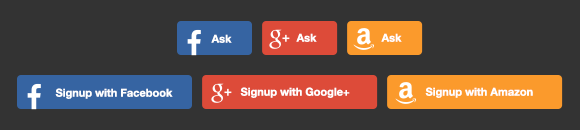
<style>
.page{position:relative;width:580px;height:130px;background:#333333}
.page>*{position:absolute;margin:0}
.t1{font:11px "HelveticaNeue-Bold";color:#ffffff}
</style>
<div class="page">
<p class="t1" style="left:211px;top:34px;width:21px;height:9px">Ask</p>
<p class="t1" style="left:296px;top:33px;width:21px;height:9px">Ask</p>
<p class="t1" style="left:381px;top:33px;width:21px;height:9px">Ask</p>
<p class="t1" style="left:55px;top:88px;width:118px;height:11px">Signup with Facebook</p>
<p class="t1" style="left:240px;top:87px;width:110px;height:11px">Signup with Google+</p>
<p class="t1" style="left:425px;top:87px;width:108px;height:11px">Signup with Amazon</p>
</div>
